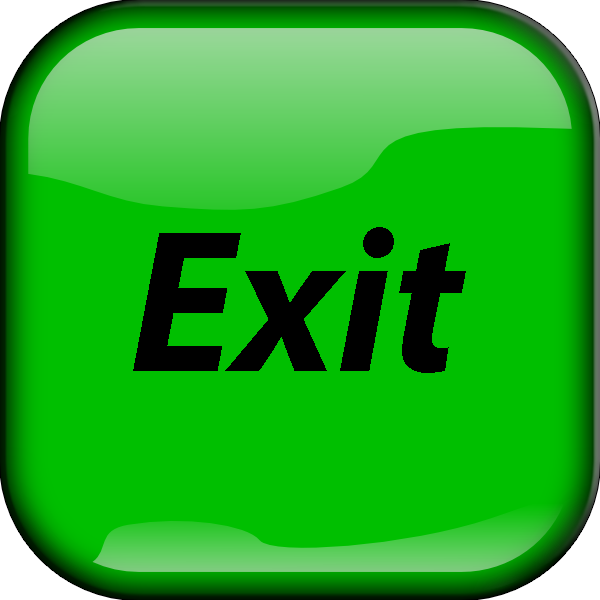
<style>
.page{position:relative;width:600px;height:600px;background:#00bf00}
.page>*{position:absolute;margin:0}
.t1{font:204.8px "MyriadPro-BoldIt";color:#000000}
</style>
<div class="page">
<p class="t1" style="left:133px;top:227px;width:333px;height:146px">Exit</p>
</div>
